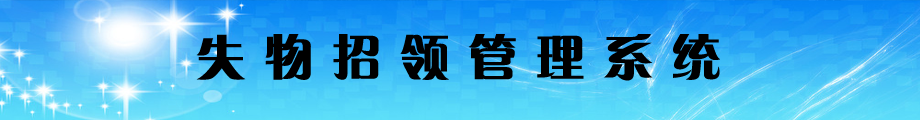
<style>
.page{position:relative;width:920px;height:120px}
.page>*{position:absolute;margin:0}
.t1{font:48px "FZCQJW--GB1-0";letter-spacing:0.39em;color:#000000;font-weight:bold}
</style>
<div class="page">
<p class="t1" style="left:196px;top:34px;width:524px;height:47px">失物招领管理系统</p>
</div>
